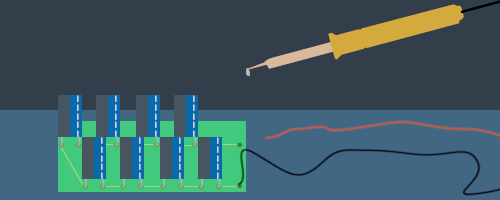
<style>
.page{position:relative;width:500px;height:200px;background:#323e4a}
.page>*{position:absolute;margin:0}
.t1{font:10.4px "Arial-BoldMT"}
</style>
<div class="page">
<p class="t1" style="left:77px;top:95px;width:2px;height:42px;rotate:90deg">_ _ _ _ _</p>
<p class="t1" style="left:115px;top:95px;width:2px;height:42px;rotate:90deg">_ _ _ _ _</p>
<p class="t1" style="left:155px;top:95px;width:2px;height:42px;rotate:90deg">_ _ _ _ _</p>
<p class="t1" style="left:193px;top:95px;width:2px;height:42px;rotate:90deg">_ _ _ _ _</p>
<p class="t1" style="left:101px;top:137px;width:2px;height:42px;rotate:90deg">_ _ _ _ _</p>
<p class="t1" style="left:139px;top:137px;width:2px;height:42px;rotate:90deg">_ _ _ _ _</p>
<p class="t1" style="left:179px;top:137px;width:2px;height:42px;rotate:90deg">_ _ _ _ _</p>
<p class="t1" style="left:217px;top:137px;width:2px;height:42px;rotate:90deg">_ _ _ _ _</p>
</div>
